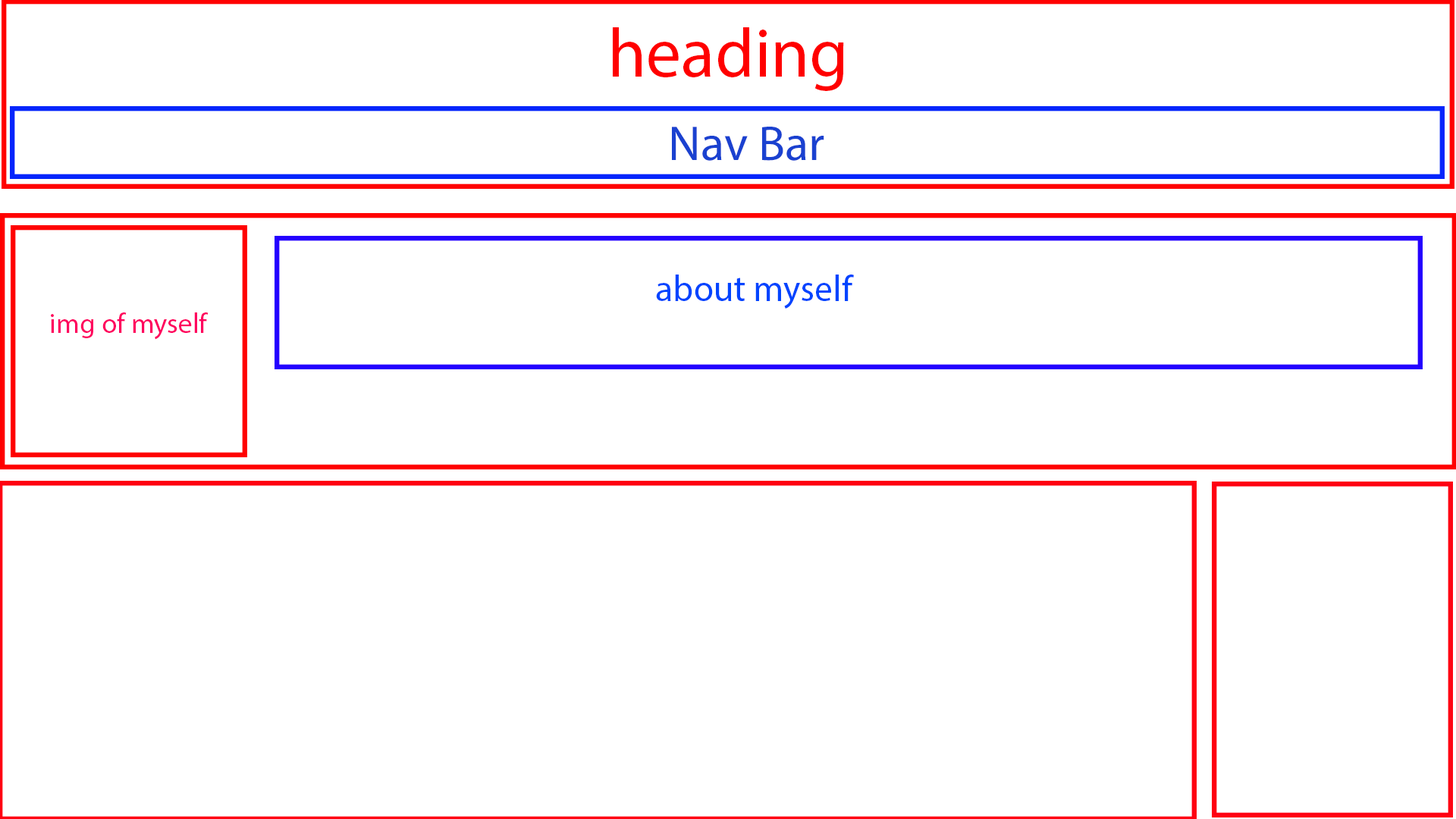
<style>
.page{position:relative;width:1456px;height:819px;background:#ffffff}
.page>*{position:absolute;margin:0}
.t1{font:69.9px "MyriadPro-Regular";color:#ff0000}
.t2{font:49.2px "MyriadPro-Regular";color:#1a41d0}
.t3{font:36.4px "MyriadPro-Regular";color:#0044ff}
.t4{font:28.2px "MyriadPro-Regular";color:#ff005e}
</style>
<div class="page">
<p class="t1" style="left:613px;top:27px;width:231px;height:64px">heading</p>
<p class="t2" style="left:672px;top:127px;width:152px;height:34px">Nav Bar</p>
<p class="t3" style="left:656px;top:275px;width:198px;height:34px">about myself</p>
<p class="t4" style="left:51px;top:312px;width:158px;height:28px">img of myself</p>
</div>
